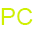
<style>
.page{position:relative;width:35px;height:35px;background:#ffffff}
.page>*{position:absolute;margin:0}
.t1{font:24px "ArialMT";color:#d0ef01}
</style>
<div class="page">
<p class="t1" style="left:1px;top:8px;width:32px;height:17px">PC</p>
</div>
